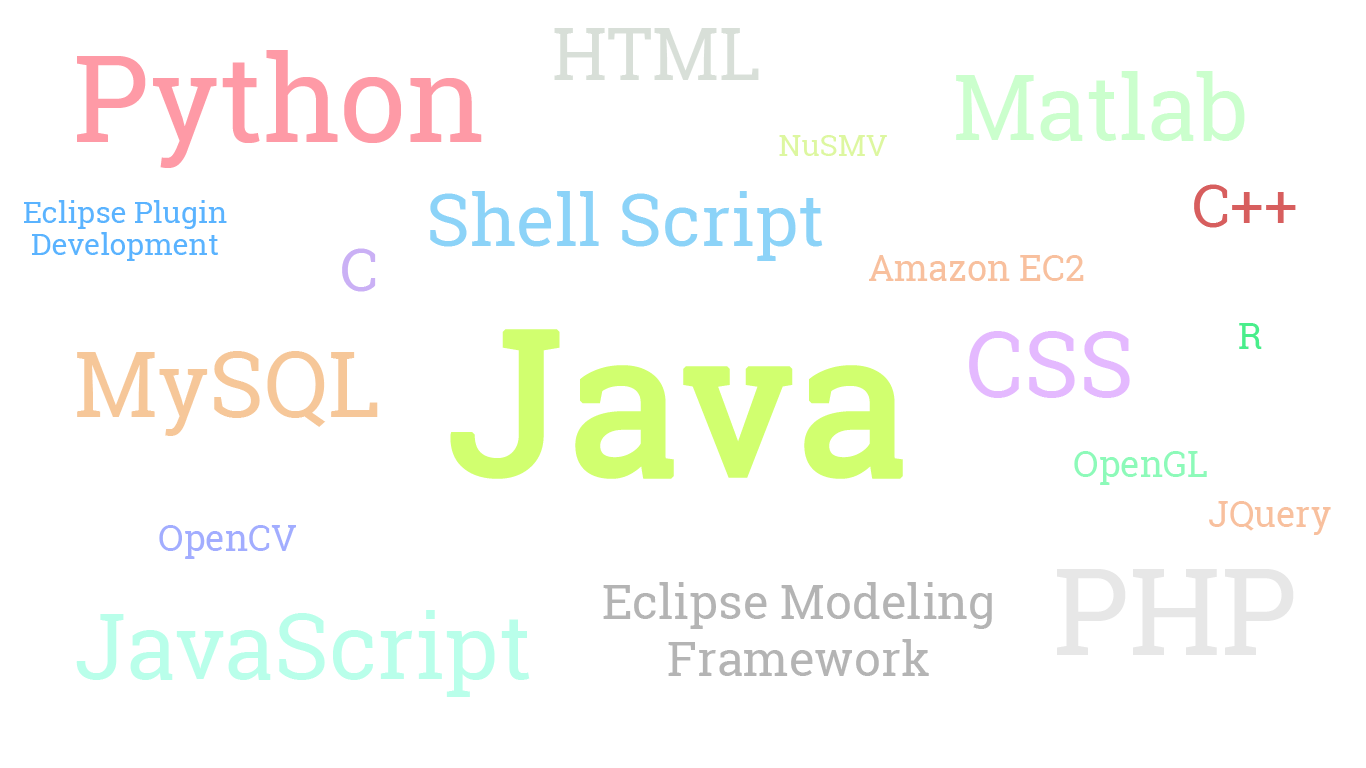
<style>
.page{position:relative;width:1366px;height:768px;background:#ffffff}
.page>*{position:absolute;margin:0}
.t1{font:72px "RobotoSlab-Regular";color:#d8dfd8}
.t2{font:120px "RobotoSlab-Regular";color:#fe9aa6}
.t3{font:90px "RobotoSlab-Regular";color:#cbffcd}
.t4{font:30px "RobotoSlab-Regular";color:#ddf7a0}
.t5{font:60px "RobotoSlab-Regular";color:#d75e5e}
.t6{font:72px "RobotoSlab-Regular";color:#8cd3f8}
.t7{font:30px/32px "RobotoSlab-Regular";color:#5ab3ff}
.t8{font:60px "RobotoSlab-Regular";color:#cab0f5}
.t9{font:36px "RobotoSlab-Regular";color:#f8c09e}
.t10{font:200px "RobotoSlab-Regular";color:#d1ff6f;font-weight:bold}
.t11{font:36px "RobotoSlab-Regular";color:#49ee8b}
.t12{font:90px "RobotoSlab-Regular";color:#e4b9ff}
.t13{font:90px "RobotoSlab-Regular";color:#f6c799}
.t14{font:36px "RobotoSlab-Regular";color:#8dfab9}
.t15{font:36px "RobotoSlab-Regular";color:#a2adff}
.t16{font:120px "RobotoSlab-Regular";color:#e7e7e7}
.t17{font:48px "RobotoSlab-Regular";color:#b4b4b4}
.t18{font:90px "RobotoSlab-Regular";color:#b9ffea}
</style>
<div class="page">
<p class="t1" style="left:554px;top:28px;width:205px;height:52px">HTML</p>
<p class="t2" style="left:77px;top:50px;width:405px;height:118px">Python</p>
<p class="t3" style="left:956px;top:71px;width:289px;height:70px">Matlab</p>
<p class="t4" style="left:779px;top:135px;width:108px;height:21px">NuSMV</p>
<p class="t5" style="left:1194px;top:184px;width:102px;height:44px">C++</p>
<p class="t6" style="left:430px;top:191px;width:393px;height:70px">Shell Script</p>
<p class="t7" style="left:24px;top:200px;width:203px;height:61px;text-align:center">Eclipse Plugin<br>Development</p>
<p class="t8" style="left:342px;top:248px;width:34px;height:44px">C</p>
<p class="t9" style="left:869px;top:255px;width:215px;height:26px">Amazon EC2</p>
<p class="t10" style="left:450px;top:329px;width:453px;height:150px">Java</p>
<p class="t11" style="left:1239px;top:323px;width:23px;height:26px">R</p>
<p class="t12" style="left:969px;top:331px;width:161px;height:67px">CSS</p>
<p class="t13" style="left:77px;top:351px;width:301px;height:85px">MySQL</p>
<p class="t14" style="left:1074px;top:451px;width:133px;height:34px">OpenGL</p>
<p class="t9" style="left:1209px;top:501px;width:122px;height:34px">JQuery</p>
<p class="t15" style="left:159px;top:525px;width:137px;height:34px">OpenCV</p>
<p class="t16" style="left:1057px;top:569px;width:237px;height:86px">PHP</p>
<p class="t17" style="left:603px;top:582px;width:389px;height:94px;text-align:center">Eclipse Modeling Framework</p>
<p class="t18" style="left:76px;top:610px;width:454px;height:87px">JavaScript</p>
</div>
